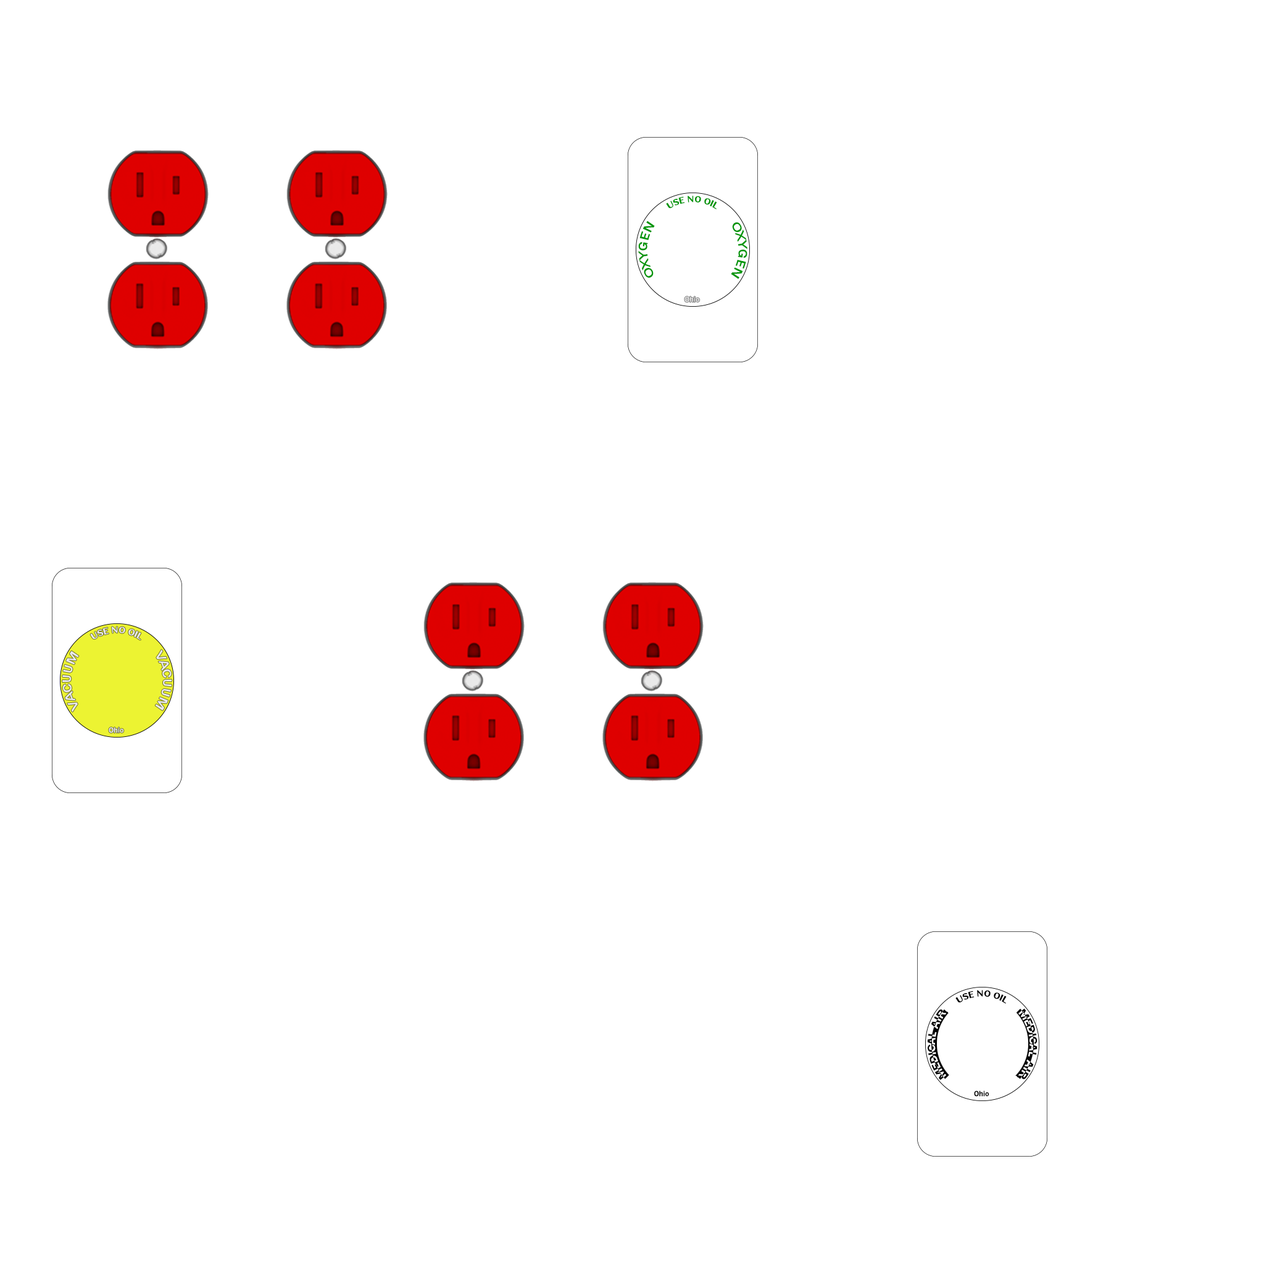
<style>
.page{position:relative;width:1264px;height:1264px;background:#ffffff}
.page>*{position:absolute;margin:0}
.t1{font:9px "FranklinGothic-Medium";color:#009607}
.t2{font:12.9px "FranklinGothic-Medium";color:#009607}
.t3{font:7.7px "FranklinGothic-Medium";color:#f0f0f0}
.t4{font:9px "FranklinGothic-Medium";color:#ebebeb}
.t5{font:12.9px "FranklinGothic-Medium";color:#ebebeb}
.t6{font:7.7px "FranklinGothic-Medium";color:#f0efef}
.t7{font:9px "FranklinGothic-Medium";color:#000000}
.t8{font:7.7px "FranklinGothic-Medium";color:#000000}
</style>
<div class="page">
<p class="t1" style="left:666px;top:196px;width:51px;height:13px">USE NO OIL</p>
<p class="t2" style="left:638px;top:221px;width:17px;height:57px;rotate:-90deg">OXYGEN</p>
<p class="t2" style="left:731px;top:222px;width:16px;height:57px;rotate:90deg">OXYGEN</p>
<p class="t3" style="left:684px;top:296px;width:16px;height:6px">Ohio</p>
<p class="t4" style="left:90px;top:626px;width:51px;height:14px">USE NO OIL</p>
<p class="t5" style="left:62px;top:650px;width:17px;height:62px;rotate:-90deg">VACUUM</p>
<p class="t5" style="left:155px;top:649px;width:17px;height:61px;rotate:90deg">VACUUM</p>
<p class="t6" style="left:109px;top:727px;width:15px;height:6px">Ohio</p>
<p class="t7" style="left:955px;top:990px;width:52px;height:13px">USE NO OIL</p>
<p class="t8" style="left:974px;top:1090px;width:15px;height:7px">Ohio</p>
</div>
